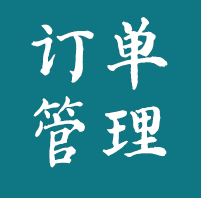
<style>
.page{position:relative;width:201px;height:198px;background:#0f7683}
.page>*{position:absolute;margin:0}
.t1{font:75px "FZZJ-YZDKJW--GB1-0";color:#ffffff}
</style>
<div class="page">
<p class="t1" style="left:31px;top:17px;width:137px;height:73px">订单</p>
<p class="t1" style="left:33px;top:96px;width:134px;height:72px">管理</p>
</div>
